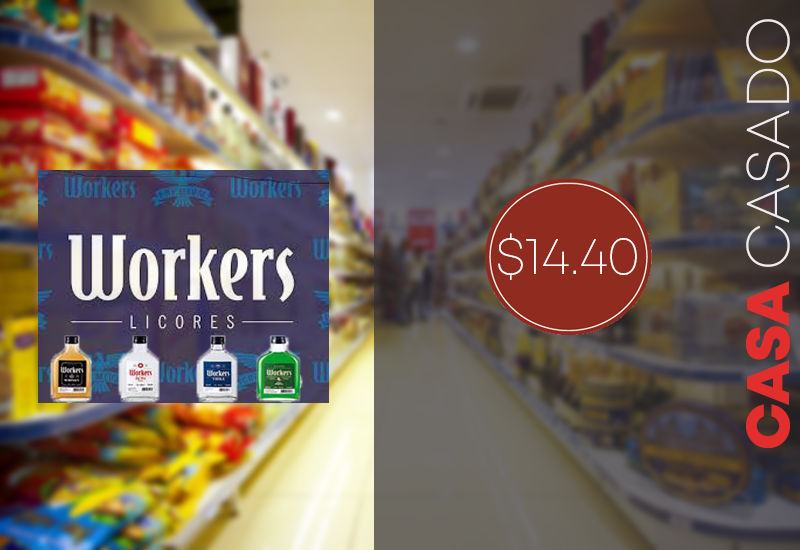
<style>
.page{position:relative;width:800px;height:550px}
.page>*{position:absolute;margin:0}
.t1{font:60px "Mont-ExtraLightDEMO";color:#f1ebeb}
.t2{font:60px "Mont-HeavyDEMO";color:#e32e2e}
.t3{font:53.3px "Mont-ExtraLightDEMO";color:#ffffff}
</style>
<div class="page">
<p class="t1" style="left:746px;top:19px;width:44px;height:430px;rotate:-90deg"><span class="t2">CASA </span>CASADO</p>
<p class="t3" style="left:498px;top:233px;width:139px;height:47px">$14.40</p>
</div>
